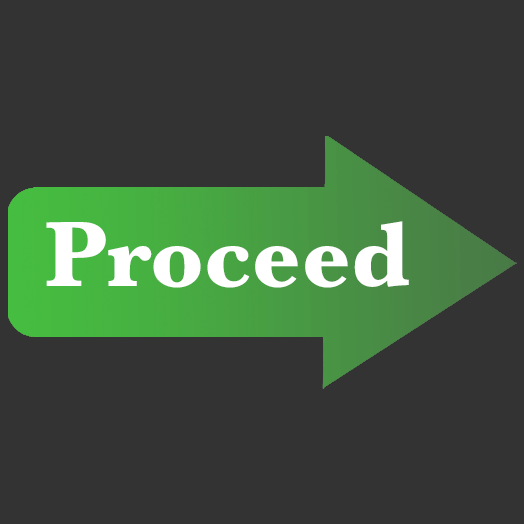
<style>
.page{position:relative;width:524px;height:524px;background:#333333}
.page>*{position:absolute;margin:0}
.t1{font:96px "Baskerville-Bold";color:#ffffff}
</style>
<div class="page">
<p class="t1" style="left:46px;top:221px;width:363px;height:67px">Proceed</p>
</div>
